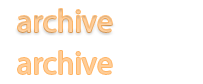
<style>
.page{position:relative;width:203px;height:84px;background:#ffffff}
.page>*{position:absolute;margin:0}
.t1{font:31.5px "MyriadPro-Regular";color:#ffcd98}
</style>
<div class="page">
<p class="t1" style="left:18px;top:9px;width:94px;height:23px">archive</p>
</div>
